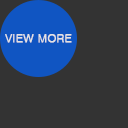
<style>
.page{position:relative;width:128px;height:128px;background:#333333}
.page>*{position:absolute;margin:0}
.t1{font:11.6px "Gulim";letter-spacing:-0.01em;color:#e3e3e4;text-transform:uppercase;font-weight:bold}
</style>
<div class="page">
<p class="t1" style="left:5px;top:34px;width:67px;height:9px">view more</p>
</div>
